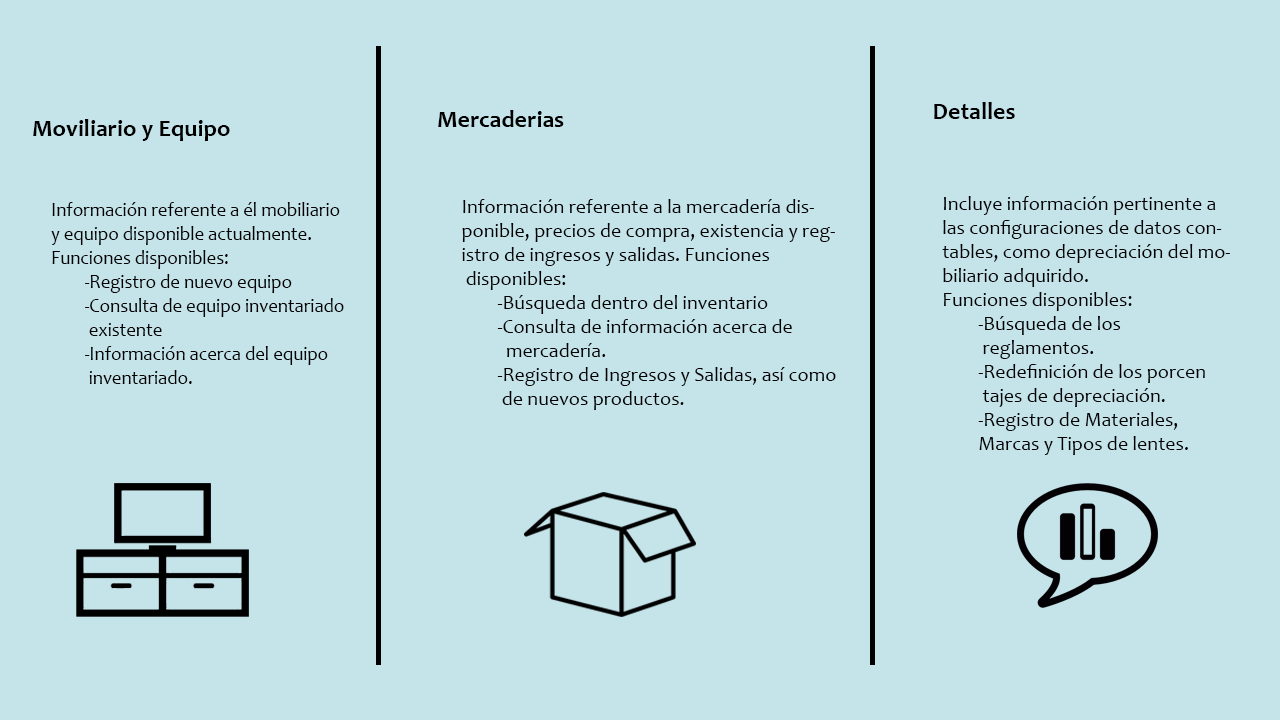
<style>
.page{position:relative;width:1280px;height:720px;background:#c5e4ea}
.page>*{position:absolute;margin:0}
.t1{font:24px "Candara-Bold";color:#000000}
.t2{font:20px "Candara";color:#000000}
.t3{font:20px "Candara";color:#000000;scale:0.93 1}
</style>
<div class="page">
<p class="t1" style="left:934px;top:102px;width:81px;height:17px">Detalles</p>
<p class="t1" style="left:438px;top:110px;width:126px;height:17px">Mercaderias</p>
<p class="t1" style="left:33px;top:119px;width:197px;height:22px">Moviliario y Equipo</p>
<p class="t2" style="left:942px;top:196px;width:288px;height:259px">Incluye información pertinente a las configuraciones de datos contables, como depreciación del mobiliario adquirido.<br>Funciones disponibles:<br> -Búsqueda de los                   reglamentos.<br> -Redefinición de los porcen             tajes de depreciación.<br> -Registro de Materiales,        Marcas y Tipos de lentes.</p>
<p class="t3" style="left:51px;top:202px;width:293px;height:182px">Información referente a él mobiliario  <br>y equipo disponible actualmente. <br>Funciones disponibles:<br> -Registro de nuevo equipo<br> -Consulta de equipo inventariado<br>   existente <br> -Información acerca del equipo<br>   inventariado.</p>
<p class="t2" style="left:462px;top:199px;width:374px;height:211px">Información referente a la mercadería disponible, precios de compra, existencia y registro de ingresos y salidas. Funciones<br> disponibles:<br> -Búsqueda dentro del inventario <br>  -Consulta de información acerca de            mercadería.<br> -Registro de Ingresos y Salidas, así como     de nuevos productos.</p>
</div>
